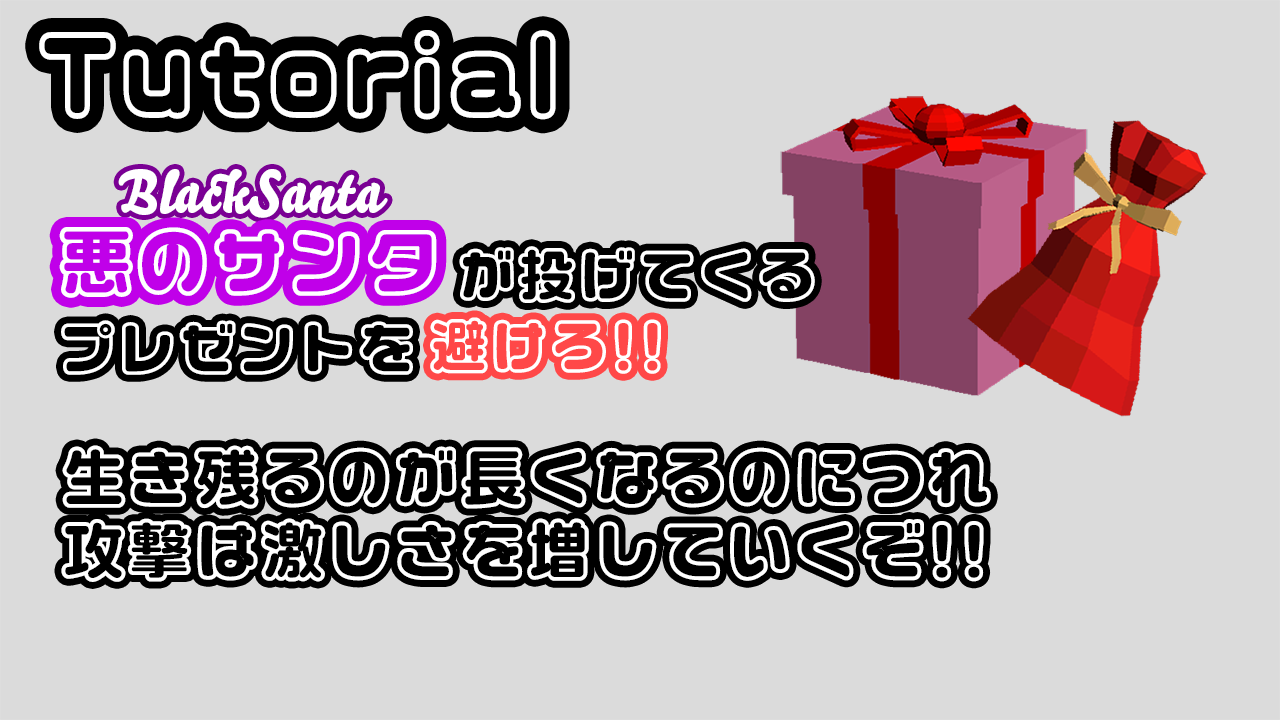
<style>
.page{position:relative;width:1280px;height:720px;background:#dbdbdb}
.page>*{position:absolute;margin:0}
.t1{font:100px "VDL-LogoMaru-pop-FutoLine";color:#ffffff}
.t2{font:60px "BelloScriptPro-Regular";color:#ffffff}
.t3{font:76.7px "VDL-LogoMaru-pop-FutoLine";color:#ffffff}
.t4{font:60px/73.3px "VDL-LogoMaru-pop-FutoLine";color:#ffffff}
.t5{font:60px "VDL-LogoMaru-pop-FutoLine";color:#ffffff}
.t6{font:66.7px/73.3px "VDL-LogoMaru-pop-FutoLine";color:#ffffff}
</style>
<div class="page">
<p class="t1" style="left:39px;top:30px;width:517px;height:90px">Tutorial</p>
<p class="t2" style="left:118px;top:169px;width:270px;height:49px">BlackSanta</p>
<p class="t3" style="left:59px;top:227px;width:378px;height:71px">悪のサンタ</p>
<p class="t4" style="left:61px;top:246px;width:754px;height:129px">が投げてくる<br>プレゼントを</p>
<p class="t5" style="left:430px;top:317px;width:231px;height:57px">避けろ!!</p>
<p class="t6" style="left:61px;top:445px;width:930px;height:137px">生き残るのが長くなるのにつれ<br>攻撃は激しさを増していくぞ!!</p>
</div>
